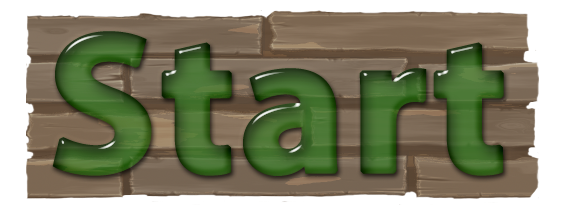
<style>
.page{position:relative;width:570px;height:216px;background:#ffffff}
.page>*{position:absolute;margin:0}
.t1{font:200px "MyriadPro-Bold";font-weight:bold}
</style>
<div class="page">
<p class="t1" style="left:52px;top:31px;width:452px;height:145px">Start</p>
<p class="t1" style="left:52px;top:31px;width:452px;height:145px">Start</p>
</div>
